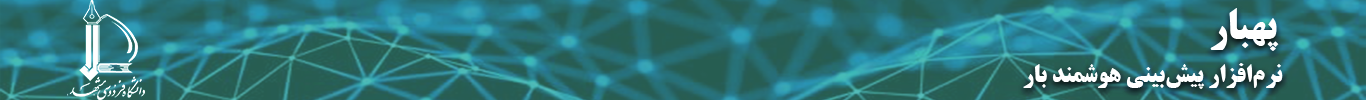
<style>
.page{position:relative;width:1366px;height:100px}
.page>*{position:absolute;margin:0}
.t1{font:41.7px "BTitrBold";color:#ffffff}
.t2{font:25px "BTitrBold";color:#ffffff}
</style>
<div class="page">
<p class="t1" style="left:1210px;top:8px;width:69px;height:43px">پهبار</p>
<p class="t2" style="left:1023px;top:63px;width:260px;height:26px">نرم‌افزار پیش‌بینی هوشمند بار</p>
</div>
